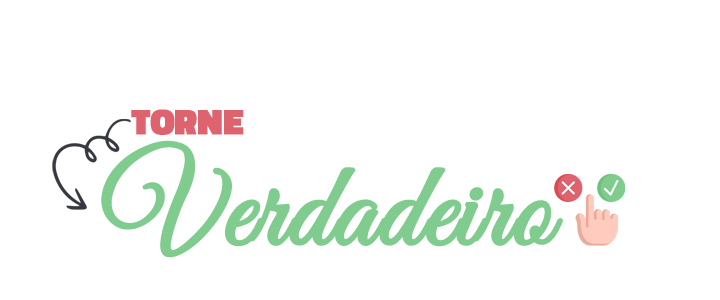
<style>
.page{position:relative;width:720px;height:300px;background:#ffffff}
.page>*{position:absolute;margin:0}
.t1{font:36px "TitilliumWeb-Black";letter-spacing:-0.01em;color:#dd636e;text-transform:uppercase;font-weight:bold}
.t2{font:120px "GreatVibes-Regular";letter-spacing:-0.01em;color:#80cb8e;font-weight:bold}
.t3{font:72px "GreatVibes-Regular";letter-spacing:-0.01em;color:#80cb8e;text-transform:uppercase;font-weight:bold}
</style>
<div class="page">
<p class="t1" style="left:131px;top:109px;width:113px;height:26px">Torne</p>
<p class="t2" style="left:101px;top:140px;width:462px;height:118px"><span class="t3"><br></span>Verdadeiro</p>
</div>
